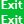
<style>
.page{position:relative;width:24px;height:24px;background:#00be31}
.page>*{position:absolute;margin:0}
.t1{font:12.5px "TrebuchetMS-Bold";color:#ffffff;scale:0.96 1}
</style>
<div class="page">
<p class="t1" style="left:1px;top:0px;width:22px;height:24px">Exit<br>Exit</p>
</div>
